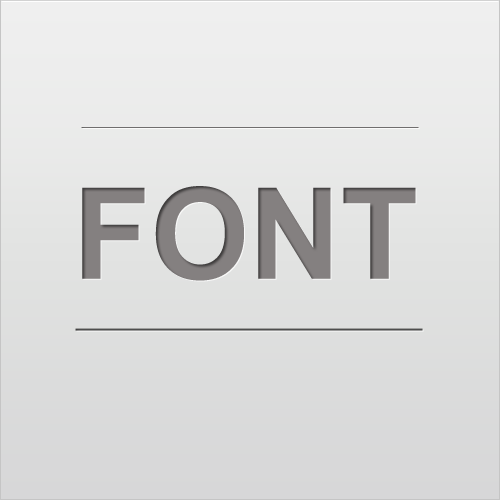
<style>
.page{position:relative;width:500px;height:500px}
.page>*{position:absolute;margin:0}
.t1{font:126.8px "Arial-BoldMT";color:#848080}
</style>
<div class="page">
<p class="t1" style="left:82px;top:186px;width:334px;height:95px">FONT</p>
</div>
